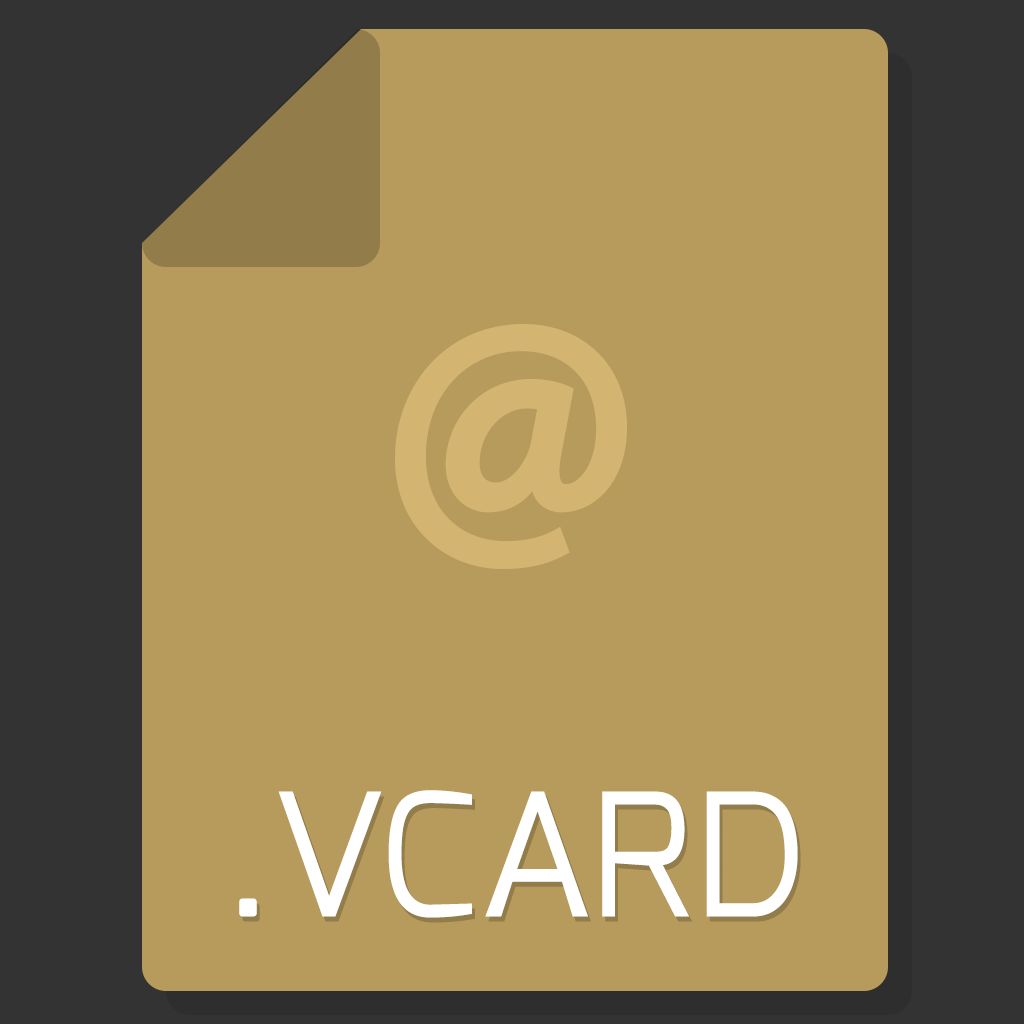
<style>
.page{position:relative;width:1024px;height:1024px;background:#b79b5c}
.page>*{position:absolute;margin:0}
.t1{font:170.3px "Exo-Regular";color:#ffffff}
</style>
<div class="page">
<p class="t1" style="left:239px;top:790px;width:559px;height:128px">.VCARD</p>
</div>
